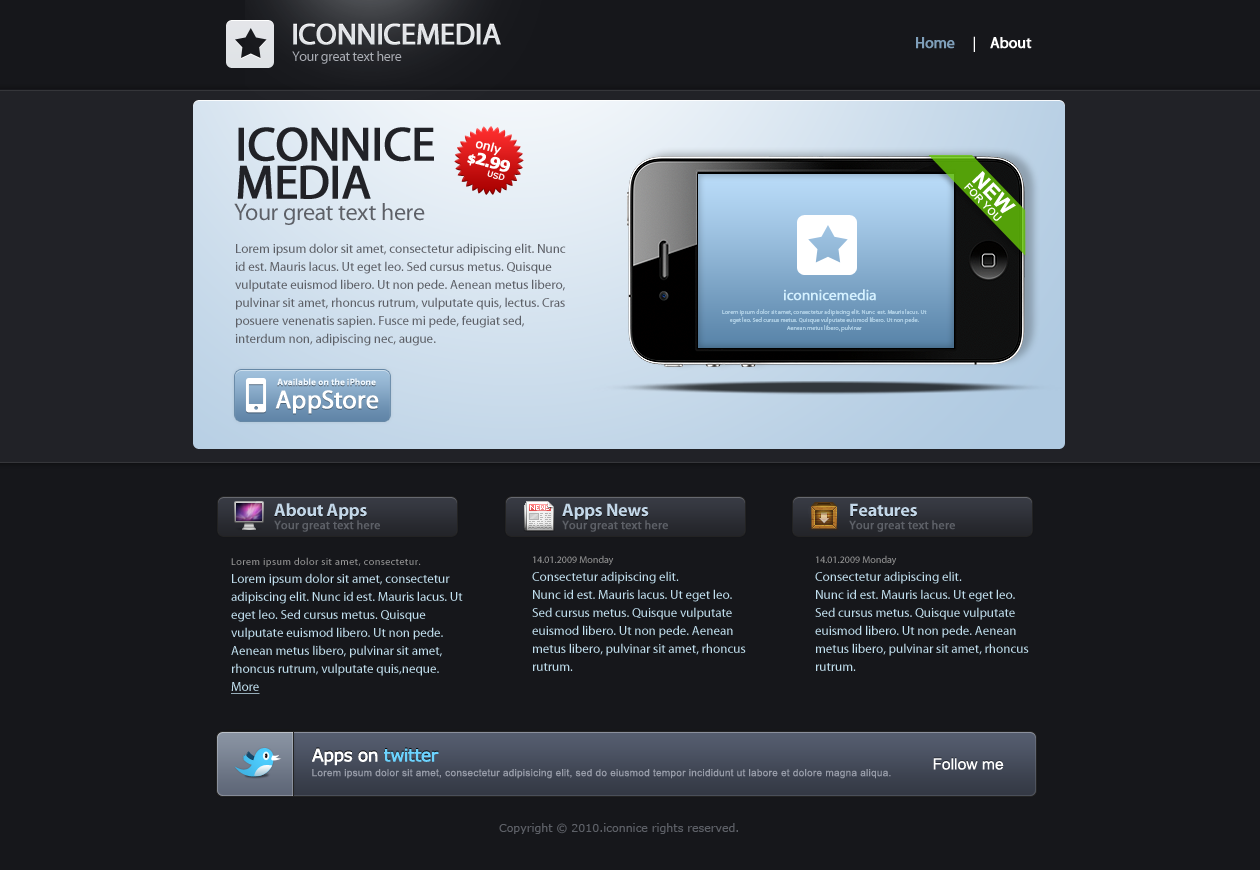
<style>
.page{position:relative;width:1260px;height:870px;background:#16171b}
.page>*{position:absolute;margin:0}
.t1{font:30px "MyriadPro-Regular";letter-spacing:-0.025em;color:#e2e4e8;font-weight:bold}
.t2{font:15px "MyriadPro-Regular";color:#ffffff;font-weight:bold}
.t3{font:15px "MyriadPro-Regular";color:#7f9fba;font-weight:bold}
.t4{font:15px "MyriadPro-Regular";color:#ffffff}
.t5{font:14px "MyriadPro-Regular";letter-spacing:-0.025em;color:#a9acb3}
.t6{font:48px/38px "MyriadPro-Regular";letter-spacing:-0.025em;color:#212227;font-weight:bold}
.t7{font:11.9px/15.9px "Verdana";letter-spacing:-0.01em;color:#ffffff;font-weight:bold}
.t8{font:11.9px/15.9px "Verdana-Bold";letter-spacing:-0.1em;color:#ffffff;font-weight:bold}
.t9{font:15.9px/15.9px "Verdana-Bold";letter-spacing:-0.1em;color:#ffffff;font-weight:bold}
.t10{font:7.9px/9.2px "Verdana";letter-spacing:-0.01em;color:#ffffff;font-weight:bold}
.t11{font:10.3px/10.3px "ArialMT";letter-spacing:0.025em;color:#ffffff;text-transform:uppercase}
.t12{font:20.6px/10.3px "Arial-BoldMT";letter-spacing:0.025em;color:#ffffff}
.t13{font:24px "MyriadPro-Regular";letter-spacing:-0.01em;color:#626262}
.t14{font:13px/18px "MyriadPro-Regular";color:#5d6067}
.t15{font:14.9px "MyriadPro-Regular";letter-spacing:-0.005em;color:#d5f1ff;font-weight:bold}
.t16{font:6px/8px "MyriadPro-Regular";color:#aacbe1}
.t17{font:25.8px "MyriadPro-Regular";letter-spacing:-0.005em;color:#ffffff;font-weight:bold}
.t18{font:9px "MyriadPro-Bold";letter-spacing:-0.005em;color:#ffffff;font-weight:bold}
.t19{font:18px "MyriadPro-Bold";letter-spacing:-0.01em;color:#c3d7e8}
.t20{font:12px "MyriadPro-Regular";color:#5d6067;font-weight:bold}
.t21{font:10px "MyriadPro-Regular";letter-spacing:0.05em;color:#959595}
.t22{font:13px/18px "MyriadPro-Regular";color:#c0deed}
.t23{font:10px/18px "MyriadPro-Regular";color:#959595}
.t24{font:13px/18px "MyriadPro-Regular";color:#c0deed;text-decoration:underline}
.t25{font:17.1px "Verdana";letter-spacing:-0.05em;color:#ffffff;font-weight:bold}
.t26{font:17.1px "Verdana";letter-spacing:-0.05em;color:#6cd3fe;font-weight:bold}
.t27{font:15.6px "ArialMT";color:#ffffff}
.t28{font:10px "ArialMT";letter-spacing:0.025em;color:#989da9}
.t29{font:11px "Verdana";color:#5d6067}
</style>
<div class="page">
<p class="t1" style="left:293px;top:23px;width:208px;height:22px">ICONNICEMEDIA</p>
<p class="t2" style="left:916px;top:36px;width:116px;height:16px"><span class="t3">Home     </span><span class="t4">| </span>   About</p>
<p class="t5" style="left:292px;top:51px;width:110px;height:13px">Your great text here</p>
<p class="t6" style="left:237px;top:127px;width:197px;height:72px">ICONNICE<br>MEDIA</p>
<p class="t7" style="left:467px;top:141px;width:43px;height:39px;text-align:center;rotate:15deg">only<br><span class="t8">$</span><span class="t9">2.99<br></span><span class="t10">        USD</span></p>
<p class="t11" style="left:964px;top:171px;width:52px;height:50px;rotate:46deg"><span class="t12">NEW <br></span>for you</p>
<p class="t13" style="left:234px;top:203px;width:191px;height:22px">Your great text here</p>
<p class="t14" style="left:235px;top:243px;width:331px;height:103px">Lorem ipsum dolor sit amet, consectetur adipiscing elit. Nunc id est. Mauris lacus. Ut eget leo. Sed cursus metus. Quisque vulputate euismod libero. Ut non pede. Aenean metus libero, pulvinar sit amet, rhoncus rutrum, vulputate quis, lectus. Cras posuere venenatis sapien. Fusce mi pede, feugiat sed, interdum non, adipiscing nec, augue.</p>
<p class="t15" style="left:784px;top:289px;width:92px;height:12px">iconnicemedia</p>
<p class="t16" style="left:722px;top:309px;width:205px;height:23px;text-align:center">Lorem ipsum dolor sit amet, consectetur adipiscing elit. Nunc  est. Mauris lacus. Ut eget leo. Sed cursus metus. Quisque vulputate euismod libero. Ut non pede. Aenean metus libero, pulvinar</p>
<p class="t17" style="left:275px;top:390px;width:104px;height:24px">AppStore</p>
<p class="t18" style="left:277px;top:378px;width:99px;height:8px">Available on the iPhone</p>
<p class="t19" style="left:274px;top:503px;width:93px;height:17px">About Apps</p>
<p class="t19" style="left:562px;top:503px;width:87px;height:17px">Apps News</p>
<p class="t19" style="left:850px;top:503px;width:67px;height:14px">Features</p>
<p class="t20" style="left:274px;top:520px;width:106px;height:12px">Your great text here</p>
<p class="t20" style="left:562px;top:520px;width:106px;height:12px">Your great text here</p>
<p class="t20" style="left:849px;top:520px;width:106px;height:12px">Your great text here</p>
<p class="t21" style="left:231px;top:557px;width:190px;height:10px">Lorem ipsum dolor sit amet, consectetur.</p>
<p class="t22" style="left:532px;top:555px;width:214px;height:116px"><span class="t23">14.01.2009 Monday <br></span>Consectetur adipiscing elit. <br>Nunc id est. Mauris lacus. Ut eget leo. Sed cursus metus. Quisque vulputate euismod libero. Ut non pede. Aenean metus libero, pulvinar sit amet, rhoncus rutrum.</p>
<p class="t22" style="left:815px;top:555px;width:214px;height:116px"><span class="t23">14.01.2009 Monday <br></span>Consectetur adipiscing elit. <br>Nunc id est. Mauris lacus. Ut eget leo. Sed cursus metus. Quisque vulputate euismod libero. Ut non pede. Aenean metus libero, pulvinar sit amet, rhoncus rutrum.</p>
<p class="t22" style="left:231px;top:573px;width:232px;height:121px">Lorem ipsum dolor sit amet, consectetur adipiscing elit. Nunc id est. Mauris lacus. Ut eget leo. Sed cursus metus. Quisque vulputate euismod libero. Ut non pede. Aenean metus libero, pulvinar sit amet, rhoncus rutrum, vulputate quis,neque. <br><span class="t24">More</span></p>
<p class="t25" style="left:312px;top:748px;width:127px;height:18px">Apps on<span class="t26"> twitter</span></p>
<p class="t27" style="left:933px;top:758px;width:71px;height:12px">Follow me</p>
<p class="t28" style="left:312px;top:769px;width:579px;height:10px">Lorem ipsum dolor sit amet, consectetur adipisicing elit, sed do eiusmod tempor incididunt ut labore et dolore magna aliqua.</p>
<p class="t29" style="left:499px;top:823px;width:239px;height:11px">Copyright © 2010.iconnice rights reserved.</p>
</div>
